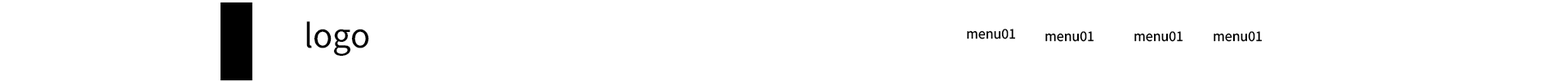
<style>
.page{position:relative;width:1568px;height:82px;background:#ffffff}
.page>*{position:absolute;margin:0}
.t1{font:32.7px "NotoSansKR-Regular";color:#000000}
.t2{font:13.1px "NotoSansKR-Regular";color:#000000}
</style>
<div class="page">
<p class="t1" style="left:306px;top:21px;width:63px;height:35px">logo</p>
<p class="t2" style="left:967px;top:29px;width:48px;height:10px">menu01</p>
<p class="t2" style="left:1045px;top:31px;width:49px;height:11px">menu01</p>
<p class="t2" style="left:1134px;top:31px;width:49px;height:11px">menu01</p>
<p class="t2" style="left:1214px;top:31px;width:48px;height:11px">menu01</p>
</div>
